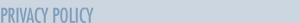
<style>
.page{position:relative;width:300px;height:23px;background:#ccd6e0}
.page>*{position:absolute;margin:0}
.t1{font:20px "Futura-Condensed";letter-spacing:-0.02em;color:#7f9ebc}
</style>
<div class="page">
<p class="t1" style="left:1px;top:7px;width:93px;height:16px">PRIVACY POLICY</p>
</div>
